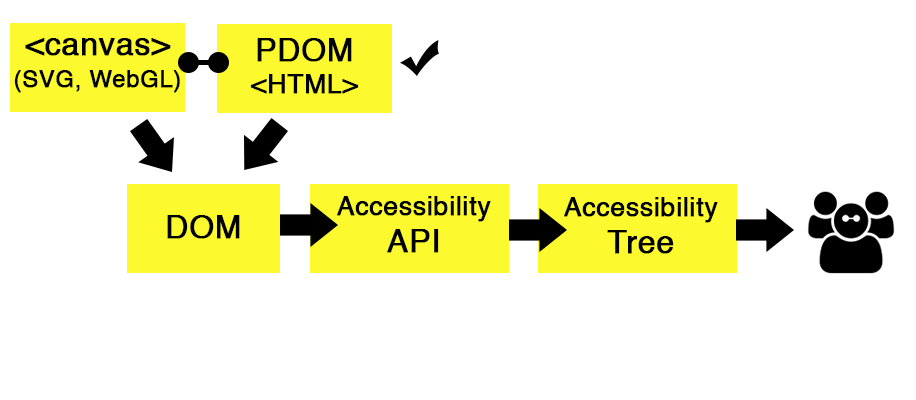
<style>
.page{position:relative;width:916px;height:400px;background:#ffffff}
.page>*{position:absolute;margin:0}
.t1{font:23.8px/32px "Helvetica";letter-spacing:0.005em;color:#000000;font-weight:bold}
.t2{font:31.7px/32px "Helvetica";letter-spacing:0.005em;color:#000000;font-weight:bold}
.t3{font:26.4px/32px "Helvetica";letter-spacing:0.005em;color:#000000;font-weight:bold}
.t4{font:26.4px/37.3px "Helvetica";letter-spacing:0.005em;color:#000000;font-weight:bold}
.t5{font:31.7px/37.3px "Helvetica";letter-spacing:0.005em;color:#000000;font-weight:bold}
.t6{font:31.7px "Helvetica";letter-spacing:0.005em;color:#000000;font-weight:bold}
</style>
<div class="page">
<p class="t1" style="left:14px;top:38px;width:166px;height:55px;text-align:center"><span class="t2">&lt;canvas&gt;<br></span>(SVG, WebGL)</p>
<p class="t3" style="left:250px;top:38px;width:109px;height:56px;text-align:center"><span class="t2">PDOM<br></span>&lt;HTML&gt;</p>
<p class="t4" style="left:337px;top:196px;width:154px;height:57px;text-align:center">Accessibility<br><span class="t5">API</span></p>
<p class="t4" style="left:564px;top:197px;width:154px;height:57px;text-align:center">Accessibility<span class="t5"> Tree</span></p>
<p class="t6" style="left:167px;top:215px;width:73px;height:24px">DOM</p>
</div>
